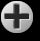
<style>
.page{position:relative;width:40px;height:41px;background:#000000}
.page>*{position:absolute;margin:0}
.t1{font:48px "Arimo-Bold";color:#272727}
</style>
<div class="page">
<p class="t1" style="left:5px;top:4px;width:25px;height:25px">+</p>
</div>
